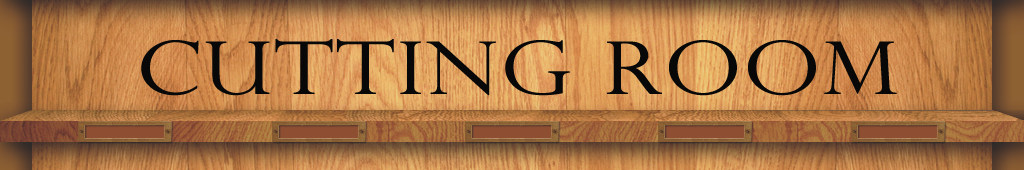
<style>
.page{position:relative;width:1024px;height:170px}
.page>*{position:absolute;margin:0}
.t1{font:72px "PerpetuaTitlingMT-Light";color:#080808;font-weight:bold;scale:1.23 1}
</style>
<div class="page">
<p class="t1" style="left:141px;top:39px;width:756px;height:57px">Cutting Room</p>
</div>
